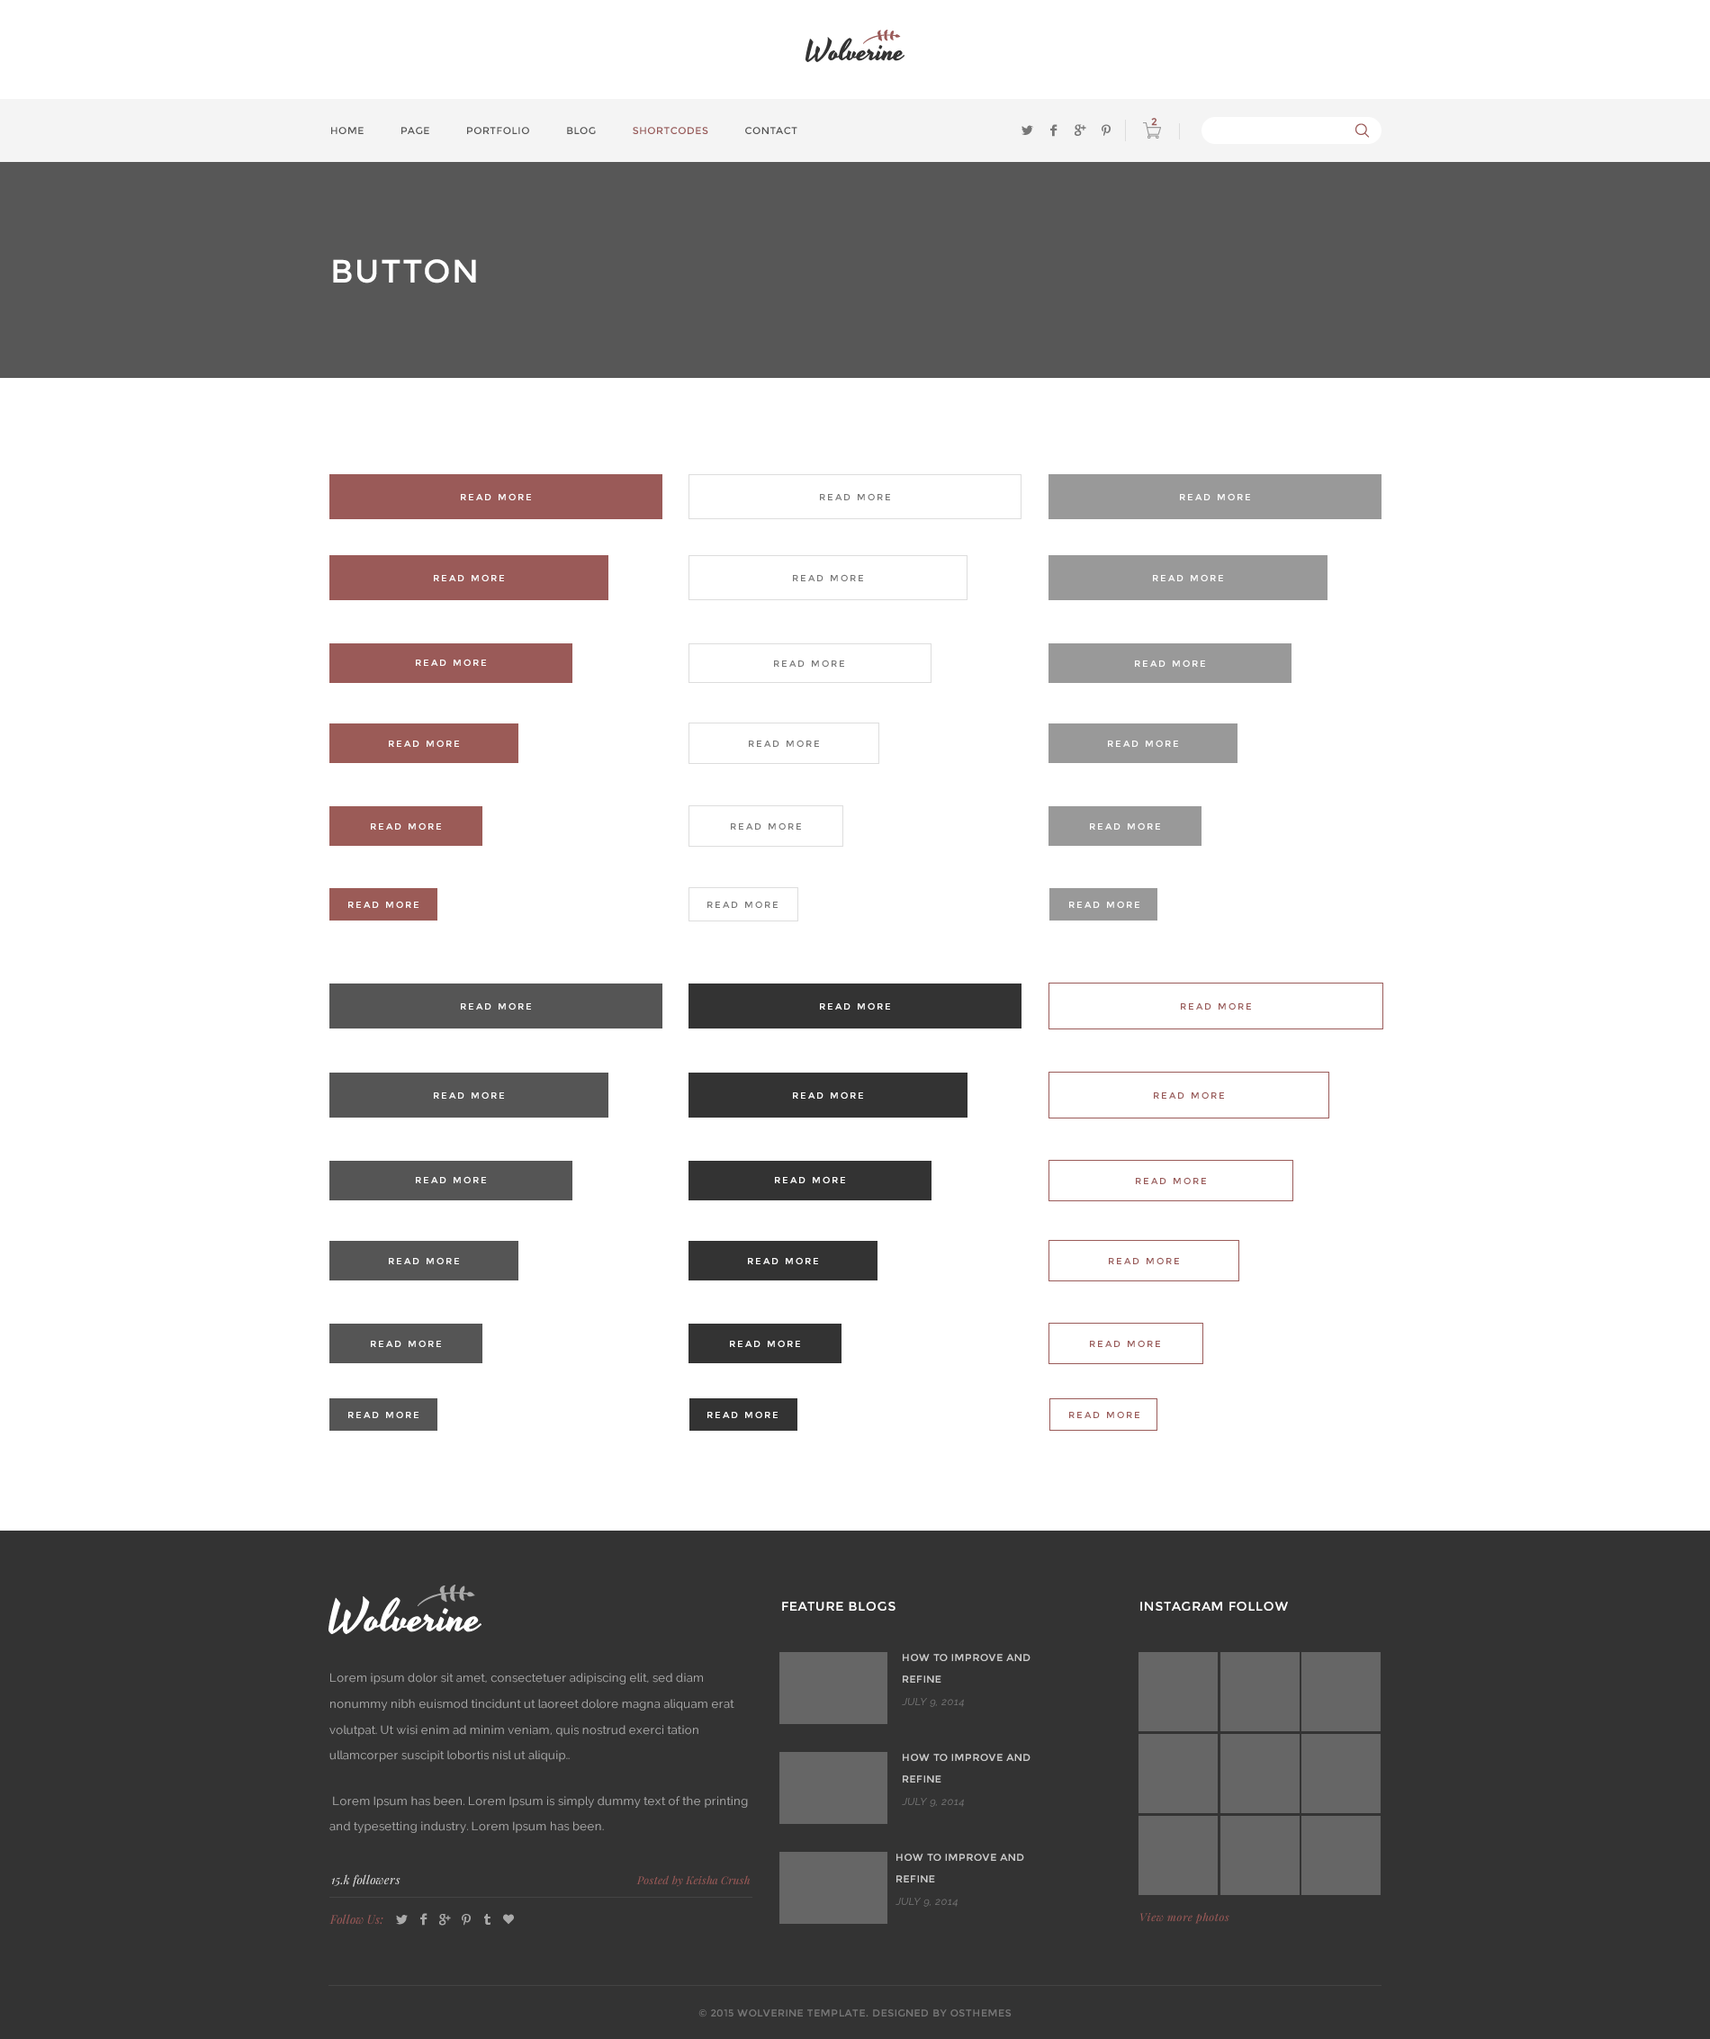
<style>
.page{position:relative;width:1710px;height:2039px;background:#ffffff}
.page>*{position:absolute;margin:0}
.t1{font:9.9px "Montserrat-Regular";color:#9a5a58;font-weight:bold}
.t2{font:9.9px "Montserrat-Regular";letter-spacing:0.05em;color:#535353}
.t3{font:9.9px "Montserrat-Regular";letter-spacing:0.05em;color:#995958}
.t4{font:32.4px "Montserrat-Regular";letter-spacing:0.05em;color:#ffffff}
.t5{font:9px "Montserrat-Regular";letter-spacing:0.2em;color:#ffffff}
.t6{font:9px "Montserrat-Regular";letter-spacing:0.2em;color:#777777}
.t7{font:9px "Montserrat-Regular";letter-spacing:0.2em;color:#9a5a58}
.t8{font:9px "Montserrat-Regular";letter-spacing:0.2em;color:#995958}
.t9{font:12.6px "Montserrat-Regular";letter-spacing:0.05em;color:#ffffff}
.t10{font:9.9px/21.8px "Montserrat-Regular";letter-spacing:0.05em;color:#cccccc}
.t11{font:9.9px/21.8px "Raleway-Regular";letter-spacing:0.05em;color:#777777;font-style:italic}
.t12{font:11.7px/25.7px "Raleway-Regular";letter-spacing:0.02em;color:#aaaaaa}
.t13{font:11.7px "PlayfairDisplay-Italic";letter-spacing:0.02em;color:#dddddd}
.t14{font:10.8px "PlayfairDisplay-Italic";letter-spacing:0.02em;color:#9a5a58}
.t15{font:10.8px "PlayfairDisplay-Italic";letter-spacing:0.05em;color:#9a5a58}
.t16{font:11.7px "PlayfairDisplay-Italic";letter-spacing:0.02em;color:#995958}
.t17{font:9.9px "Montserrat-Regular";letter-spacing:0.05em;color:#777777}
</style>
<div class="page">
<p class="t1" style="left:1151px;top:118px;width:6px;height:8px">2</p>
<p class="t2" style="left:331px;top:127px;width:466px;height:7px">HOME      PAGE      PORTFOLIO      BLOG      <span class="t3">SHORTCODES</span>      CONTACT</p>
<p class="t4" style="left:333px;top:259px;width:143px;height:25px">BUTTON</p>
<p class="t5" style="left:461px;top:493px;width:70px;height:7px">READ MORE</p>
<p class="t6" style="left:820px;top:493px;width:70px;height:7px">READ MORE</p>
<p class="t5" style="left:1180px;top:493px;width:70px;height:7px">READ MORE</p>
<p class="t5" style="left:434px;top:574px;width:70px;height:7px">READ MORE</p>
<p class="t6" style="left:793px;top:574px;width:70px;height:7px">READ MORE</p>
<p class="t5" style="left:1153px;top:574px;width:70px;height:7px">READ MORE</p>
<p class="t5" style="left:416px;top:659px;width:70px;height:7px">READ MORE</p>
<p class="t6" style="left:774px;top:660px;width:70px;height:7px">READ MORE</p>
<p class="t5" style="left:1135px;top:660px;width:70px;height:7px">READ MORE</p>
<p class="t5" style="left:389px;top:740px;width:70px;height:7px">READ MORE</p>
<p class="t6" style="left:749px;top:740px;width:70px;height:7px">READ MORE</p>
<p class="t5" style="left:1108px;top:740px;width:70px;height:7px">READ MORE</p>
<p class="t5" style="left:371px;top:823px;width:70px;height:7px">READ MORE</p>
<p class="t6" style="left:731px;top:823px;width:70px;height:7px">READ MORE</p>
<p class="t5" style="left:1090px;top:823px;width:70px;height:7px">READ MORE</p>
<p class="t5" style="left:348px;top:901px;width:70px;height:7px">READ MORE</p>
<p class="t6" style="left:707px;top:901px;width:71px;height:7px">READ MORE</p>
<p class="t5" style="left:1069px;top:901px;width:70px;height:7px">READ MORE</p>
<p class="t5" style="left:461px;top:1003px;width:70px;height:7px">READ MORE</p>
<p class="t5" style="left:820px;top:1003px;width:70px;height:7px">READ MORE</p>
<p class="t7" style="left:1181px;top:1003px;width:70px;height:7px">READ MORE</p>
<p class="t5" style="left:434px;top:1092px;width:70px;height:7px">READ MORE</p>
<p class="t5" style="left:793px;top:1092px;width:70px;height:7px">READ MORE</p>
<p class="t8" style="left:1154px;top:1092px;width:70px;height:7px">READ MORE</p>
<p class="t5" style="left:416px;top:1176px;width:70px;height:8px">READ MORE</p>
<p class="t5" style="left:775px;top:1176px;width:70px;height:8px">READ MORE</p>
<p class="t8" style="left:1136px;top:1177px;width:70px;height:7px">READ MORE</p>
<p class="t5" style="left:389px;top:1257px;width:70px;height:7px">READ MORE</p>
<p class="t5" style="left:748px;top:1257px;width:70px;height:7px">READ MORE</p>
<p class="t8" style="left:1109px;top:1257px;width:70px;height:7px">READ MORE</p>
<p class="t5" style="left:371px;top:1340px;width:70px;height:7px">READ MORE</p>
<p class="t5" style="left:730px;top:1340px;width:70px;height:7px">READ MORE</p>
<p class="t8" style="left:1090px;top:1340px;width:70px;height:7px">READ MORE</p>
<p class="t5" style="left:348px;top:1411px;width:70px;height:7px">READ MORE</p>
<p class="t5" style="left:707px;top:1411px;width:71px;height:7px">READ MORE</p>
<p class="t7" style="left:1069px;top:1411px;width:70px;height:7px">READ MORE</p>
<p class="t9" style="left:782px;top:1602px;width:114px;height:9px">FEATURE BLOGS</p>
<p class="t9" style="left:1140px;top:1602px;width:148px;height:9px">INSTAGRAM FOLLOW</p>
<p class="t10" style="left:902px;top:1654px;width:128px;height:53px">HOW TO IMPROVE AND REFINE <br><span class="t11">JULY 9, 2014</span></p>
<p class="t12" style="left:329px;top:1673px;width:419px;height:160px">Lorem ipsum dolor sit amet, consectetuer adipiscing elit, sed diam nonummy nibh euismod tincidunt ut laoreet dolore magna aliquam erat volutpat. Ut wisi enim ad minim veniam, quis nostrud exerci tation ullamcorper suscipit lobortis nisl ut aliquip..<br> <br> Lorem Ipsum has been. Lorem Ipsum is simply dummy text of the printing and typesetting industry. Lorem Ipsum has been.</p>
<p class="t10" style="left:902px;top:1754px;width:128px;height:53px">HOW TO IMPROVE AND REFINE <br><span class="t11">JULY 9, 2014</span></p>
<p class="t10" style="left:896px;top:1854px;width:128px;height:53px">HOW TO IMPROVE AND REFINE <br><span class="t11">JULY 9, 2014</span></p>
<p class="t13" style="left:331px;top:1875px;width:69px;height:12px">15.k followers</p>
<p class="t14" style="left:636px;top:1876px;width:114px;height:11px">Posted by Keisha Crush</p>
<p class="t15" style="left:1140px;top:1912px;width:89px;height:12px">View more photos</p>
<p class="t16" style="left:329px;top:1914px;width:54px;height:11px">Follow Us:</p>
<p class="t17" style="left:698px;top:2010px;width:314px;height:8px">© 2015 WOLVERINE TEMPLATE. DESIGNED BY OSTHEMES</p>
</div>
